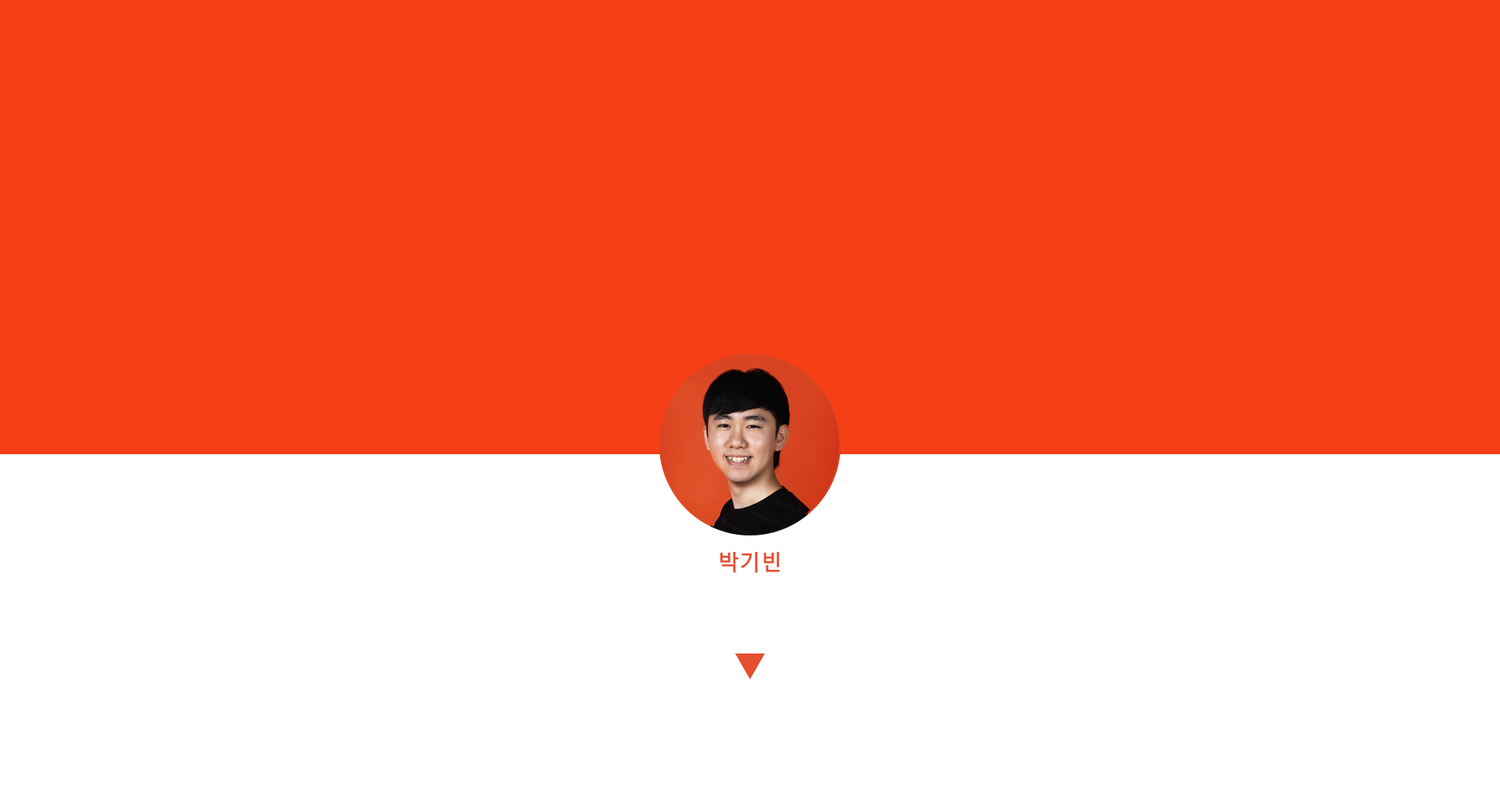
<style>
.page{position:relative;width:1500px;height:795px;background:#f63f14}
.page>*{position:absolute;margin:0}
.t1{font:20.8px "MalgunGothic";color:#e54e2f;font-weight:bold}
</style>
<div class="page">
<p class="t1" style="left:721px;top:552px;width:59px;height:21px">박기빈</p>
</div>
